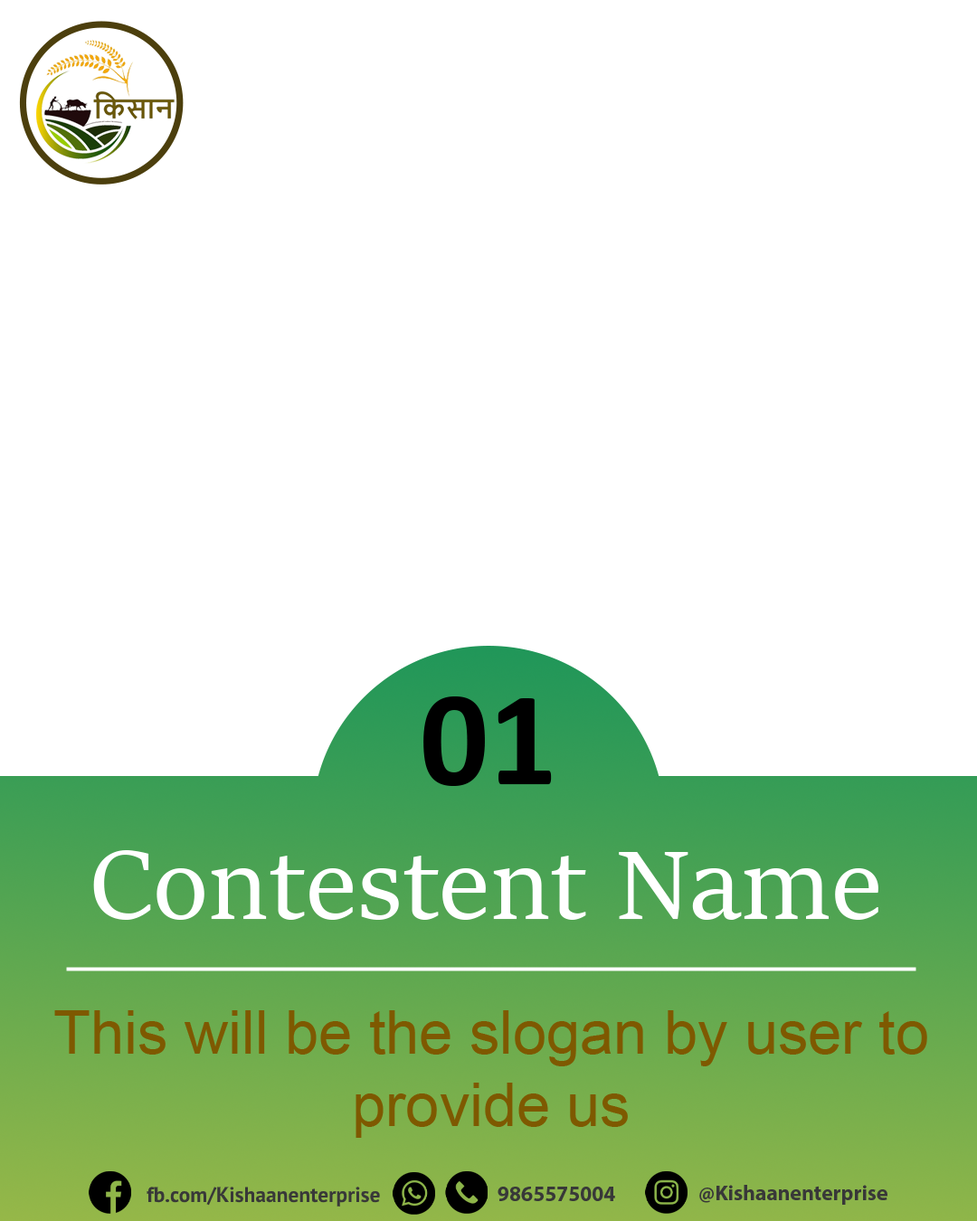
<style>
.page{position:relative;width:977px;height:1221px;background:#ffffff}
.page>*{position:absolute;margin:0}
.t1{font:135.7px "Calibri-Bold";color:#000000}
.t2{font:105.5px "SitkaSubheading";color:#ffffff}
.t3{font:60.3px "ArialMT";color:#7e5900}
.t4{font:21.2px "MyriadPro-Bold";color:#383838}
</style>
<div class="page">
<p class="t1" style="left:423px;top:696px;width:129px;height:90px">01</p>
<p class="t2" style="left:93px;top:850px;width:785px;height:70px">Contestent Name</p>
<p class="t3" style="left:54px;top:1010px;width:873px;height:128px;text-align:center">This will be the slogan by user to provide us</p>
<p class="t4" style="left:147px;top:1187px;width:233px;height:19px">fb.com/Kishaanenterprise</p>
<p class="t4" style="left:497px;top:1187px;width:118px;height:14px">9865575004</p>
<p class="t4" style="left:699px;top:1185px;width:188px;height:20px">@Kishaanenterprise</p>
</div>
